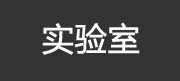
<style>
.page{position:relative;width:180px;height:81px;background:#333333}
.page>*{position:absolute;margin:0}
.t1{font:32px "MicrosoftYaHei";color:#fafafa;font-weight:bold}
</style>
<div class="page">
<p class="t1" style="left:42px;top:22px;width:98px;height:33px">实验室</p>
</div>
